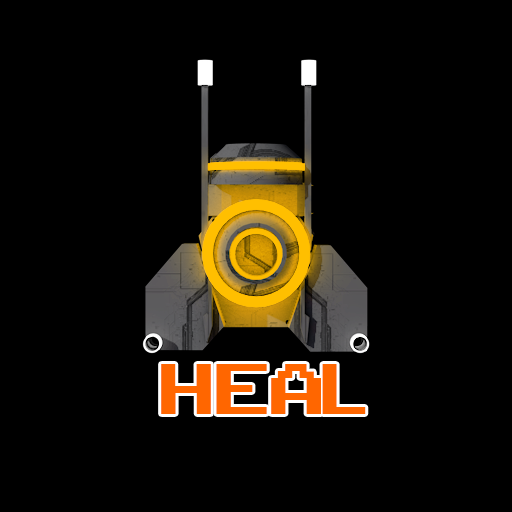
<style>
.page{position:relative;width:512px;height:512px;background:#000000}
.page>*{position:absolute;margin:0}
.t1{font:100px "ArcadeClassic";color:#ff6600}
</style>
<div class="page">
<p class="t1" style="left:161px;top:364px;width:205px;height:50px">Heal</p>
</div>
